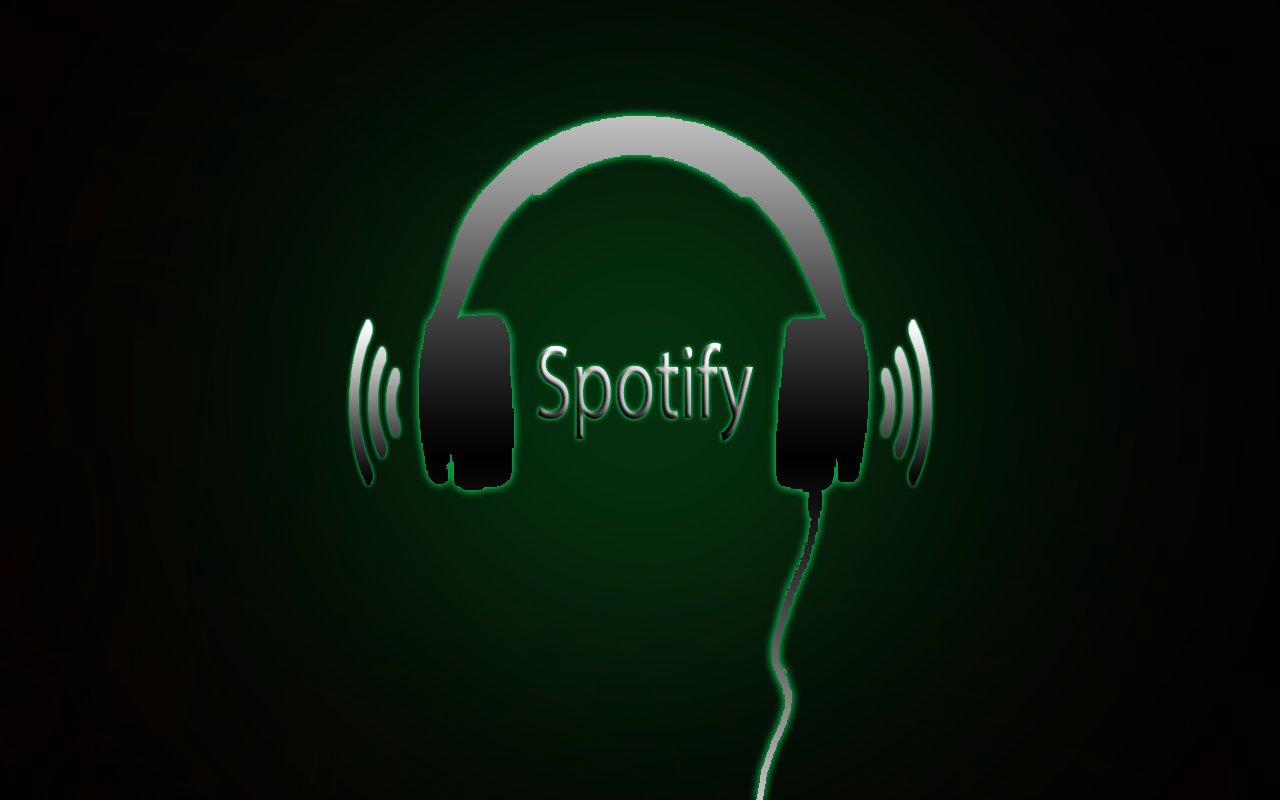
<style>
.page{position:relative;width:1280px;height:800px}
.page>*{position:absolute;margin:0}
.t1{font:104.9px "MyriadPro-Regular";scale:0.71 1}
</style>
<div class="page">
<p class="t1" style="left:537px;top:342px;width:216px;height:99px">Spotify</p>
</div>
